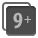
<style>
.page{position:relative;width:38px;height:38px;background:#4c4c4c}
.page>*{position:absolute;margin:0}
.t1{font:23px "MyriadPro-BoldCond";letter-spacing:0.03em;color:#b7b7b7}
.t2{font:13px "MyriadPro-BoldCond";letter-spacing:0.03em;color:#b7b7b7}
</style>
<div class="page">
<p class="t1" style="left:13px;top:12px;width:10px;height:17px">9</p>
<p class="t2" style="left:24px;top:16px;width:7px;height:7px">+</p>
</div>
